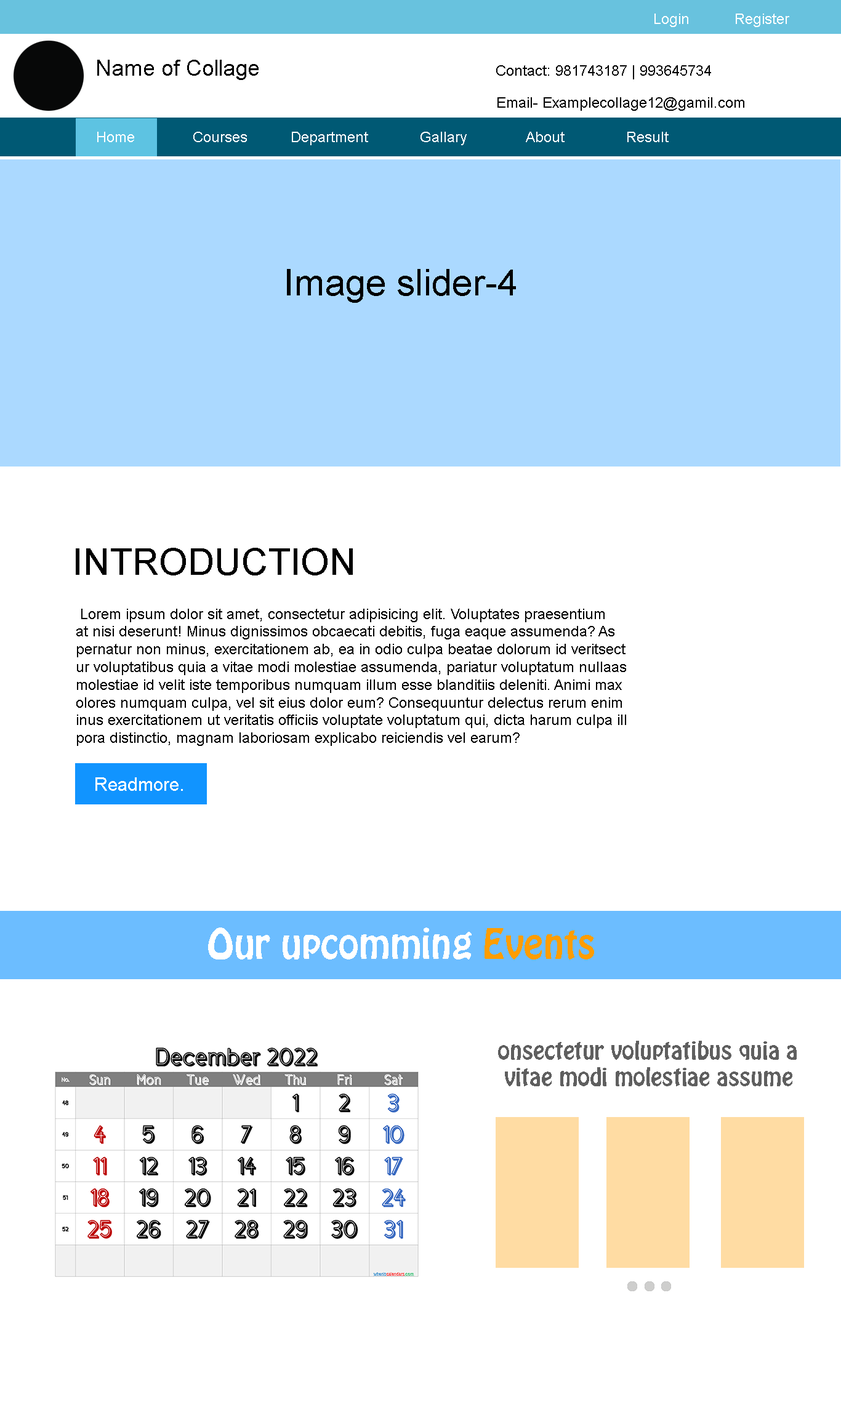
<style>
.page{position:relative;width:841px;height:1418px;background:#ffffff}
.page>*{position:absolute;margin:0}
.t1{font:14.8px "ArialMT";color:#ffffff}
.t2{font:22.2px "ArialMT";color:#000000}
.t3{font:14.8px "ArialMT";color:#000000}
.t4{font:36.9px "ArialMT";color:#000000}
.t5{font:18.5px "ArialMT";color:#ffffff}
.t6{font:36.9px "HoboStd";color:#ffffff}
.t7{font:36.9px "HoboStd";color:#ff9d00}
.t8{font:22.2px "HoboStd";color:#5f5f5f}
</style>
<div class="page">
<p class="t1" style="left:654px;top:14px;width:34px;height:13px">Login</p>
<p class="t1" style="left:736px;top:14px;width:53px;height:13px">Register</p>
<p class="t2" style="left:97px;top:60px;width:162px;height:20px">Name of Collage</p>
<p class="t3" style="left:496px;top:65px;width:215px;height:14px">Contact: 981743187 | 993645734</p>
<p class="t3" style="left:497px;top:97px;width:247px;height:14px">Email- Examplecollage12@gamil.com</p>
<p class="t1" style="left:97px;top:132px;width:37px;height:10px">Home</p>
<p class="t1" style="left:193px;top:132px;width:54px;height:10px">Courses</p>
<p class="t1" style="left:292px;top:132px;width:76px;height:13px">Department</p>
<p class="t1" style="left:420px;top:132px;width:47px;height:13px">Gallary</p>
<p class="t1" style="left:526px;top:132px;width:38px;height:10px">About</p>
<p class="t1" style="left:627px;top:132px;width:41px;height:10px">Result</p>
<p class="t4" style="left:287px;top:269px;width:229px;height:34px">Image slider-4</p>
<p class="t4" style="left:76px;top:548px;width:277px;height:28px">INTRODUCTION</p>
<p class="t3" style="left:76px;top:609px;width:550px;height:137px">Lorem ipsum dolor sit amet, consectetur adipisicing elit. Voluptates praesentium <br>at nisi deserunt! Minus dignissimos obcaecati debitis, fuga eaque assumenda? As<br>pernatur non minus, exercitationem ab, ea in odio culpa beatae dolorum id veritsect<br>ur voluptatibus quia a vitae modi molestiae assumenda, pariatur voluptatum nullaas <br>molestiae id velit iste temporibus numquam illum esse blanditiis deleniti. Animi max<br>olores numquam culpa, vel sit eius dolor eum? Consequuntur delectus rerum enim <br>inus exercitationem ut veritatis officiis voluptate voluptatum qui, dicta harum culpa ill<br>pora distinctio, magnam laboriosam explicabo reiciendis vel earum?</p>
<p class="t5" style="left:95px;top:777px;width:88px;height:14px">Readmore.</p>
<p class="t6" style="left:208px;top:928px;width:386px;height:32px">Our upcomming <span class="t7">Events</span></p>
<p class="t8" style="left:498px;top:1041px;width:298px;height:45px">onsectetur voluptatibus quia a<br> vitae modi molestiae assume</p>
</div>
